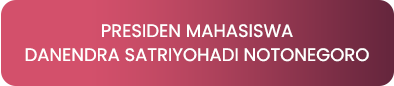
<style>
.page{position:relative;width:394px;height:86px;background:#d3506b}
.page>*{position:absolute;margin:0}
.t1{font:18px/24px "Poppins-Regular";color:#ffffff}
</style>
<div class="page">
<p class="t1" style="left:25px;top:24px;width:344px;height:38px;text-align:center">PRESIDEN MAHASISWA<br>DANENDRA SATRIYOHADI NOTONEGORO</p>
</div>
